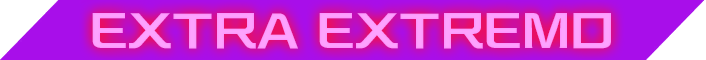
<style>
.page{position:relative;width:706px;height:60px}
.page>*{position:absolute;margin:0}
.t1{font:40px "KafuTechnoStd-HV";letter-spacing:0.012em;color:#fda3fe;scale:1.16 1}
</style>
<div class="page">
<p class="t1" style="left:92px;top:13px;width:519px;height:36px">EXTRA EXTREMO</p>
</div>
